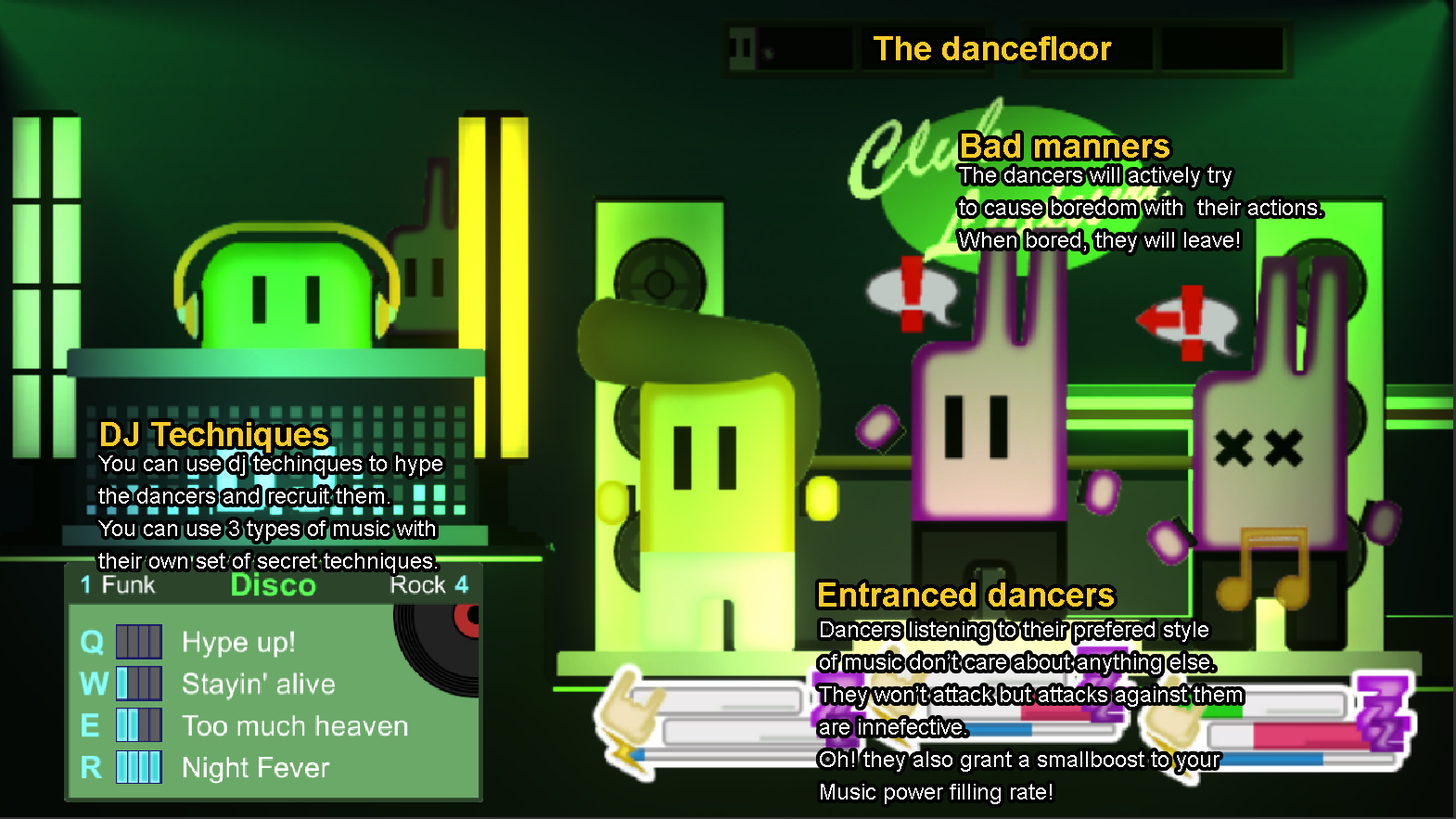
<style>
.page{position:relative;width:1456px;height:819px}
.page>*{position:absolute;margin:0}
.t1{font:33.4px "Arial-BoldMT";color:#fbcb25}
.t2{font:22.3px/32.5px "ArialMT";color:#fffffe}
.t3{font:22.3px/32.5px "ArialMT";color:#ffffff}
</style>
<div class="page">
<p class="t1" style="left:874px;top:36px;width:238px;height:24px">The dancefloor</p>
<p class="t1" style="left:962px;top:134px;width:208px;height:24px">Bad manners</p>
<p class="t2" style="left:959px;top:167px;width:363px;height:85px">The dancers will actively try<br>to cause boredom with  their actions.<br>When bored, they will leave!</p>
<p class="t1" style="left:101px;top:422px;width:227px;height:31px">DJ Techniques</p>
<p class="t2" style="left:98px;top:455px;width:344px;height:118px">You can use dj techinques to hype<br>the dancers and recruit them.<br>You can use 3 types of music with<br>their own set of secret techniques.</p>
<p class="t1" style="left:819px;top:582px;width:295px;height:25px">Entranced dancers</p>
<p class="t3" style="left:819px;top:621px;width:423px;height:183px">Dancers listening to their prefered style<br>of music don’t care about anything else.<br>They won’t attack but attacks against them<br>are innefective.<br>Oh! they also grant a smallboost to your<br>Music power filling rate!</p>
</div>
